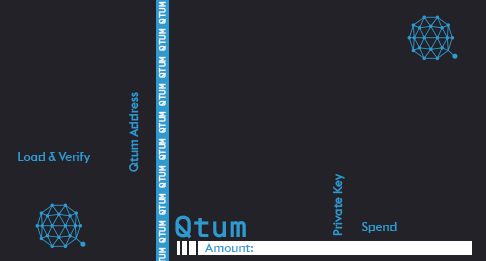
<style>
.page{position:relative;width:486px;height:261px;background:#222228}
.page>*{position:absolute;margin:0}
.t1{font:12.1px "efm";color:#2e9ad0}
.t2{font:12px "efm";color:#2e9ad0}
.t3{font:30px "simplonmono-medium";color:#2e9ad0}
</style>
<div class="page">
<p class="t1" style="left:129px;top:92px;width:10px;height:80px;rotate:-90deg">Qtum Address</p>
<p class="t2" style="left:18px;top:152px;width:72px;height:11px">Load &amp; Verify</p>
<p class="t1" style="left:333px;top:174px;width:12px;height:62px;rotate:-90deg">Private Key</p>
<p class="t3" style="left:175px;top:215px;width:71px;height:24px">Qtum</p>
<p class="t2" style="left:362px;top:222px;width:35px;height:11px">Spend</p>
<p class="t2" style="left:205px;top:243px;width:48px;height:9px">Amount:</p>
</div>
